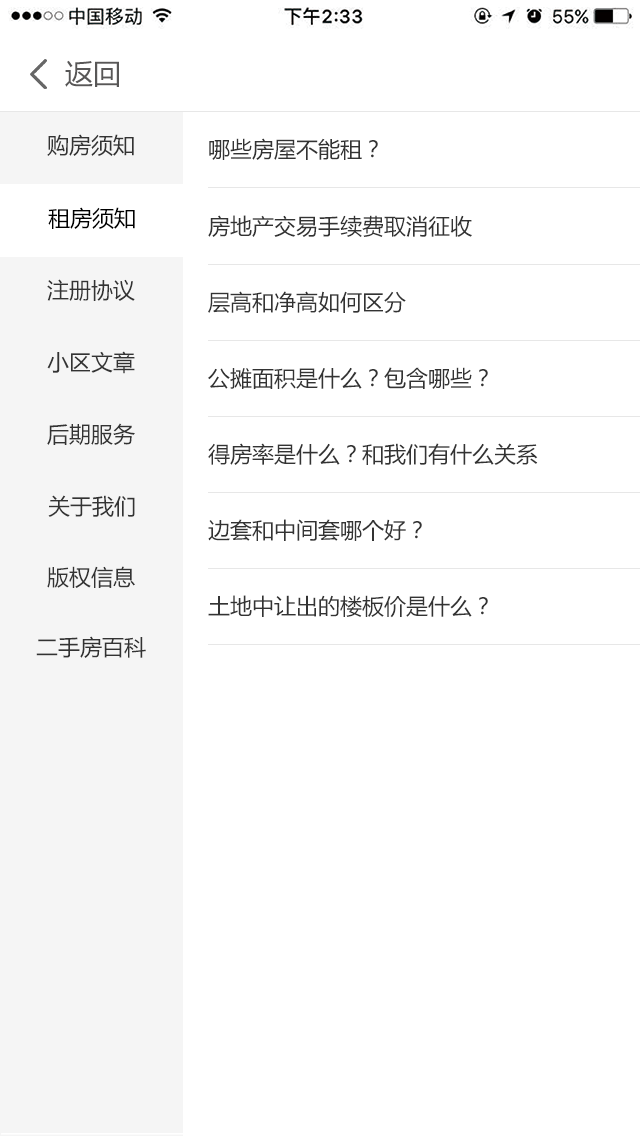
<style>
.page{position:relative;width:640px;height:1136px;background:#ffffff}
.page>*{position:absolute;margin:0}
.t1{font:28px "MicrosoftYaHei";color:#585757}
.t2{font:22px "MicrosoftYaHei";color:#333333}
.t3{font:22px "MicrosoftYaHei";color:#000000}
</style>
<div class="page">
<p class="t1" style="left:65px;top:60px;width:54px;height:27px">返回</p>
<p class="t2" style="left:47px;top:134px;width:87px;height:22px">购房须知</p>
<p class="t2" style="left:209px;top:138px;width:169px;height:22px">哪些房屋不能租？</p>
<p class="t3" style="left:48px;top:207px;width:87px;height:22px">租房须知</p>
<p class="t2" style="left:208px;top:215px;width:264px;height:22px">房地产交易手续费取消征收</p>
<p class="t2" style="left:47px;top:279px;width:88px;height:22px">注册协议</p>
<p class="t2" style="left:208px;top:291px;width:198px;height:23px">层高和净高如何区分</p>
<p class="t2" style="left:47px;top:351px;width:88px;height:23px">小区文章</p>
<p class="t2" style="left:208px;top:367px;width:280px;height:22px">公摊面积是什么？包含哪些？</p>
<p class="t2" style="left:47px;top:423px;width:88px;height:22px">后期服务</p>
<p class="t2" style="left:208px;top:443px;width:330px;height:22px">得房率是什么？和我们有什么关系</p>
<p class="t2" style="left:48px;top:495px;width:87px;height:22px">关于我们</p>
<p class="t2" style="left:208px;top:519px;width:214px;height:22px">边套和中间套哪个好？</p>
<p class="t2" style="left:47px;top:566px;width:88px;height:22px">版权信息</p>
<p class="t2" style="left:208px;top:595px;width:280px;height:23px">土地中让出的楼板价是什么？</p>
<p class="t2" style="left:36px;top:636px;width:110px;height:22px">二手房百科</p>
</div>
